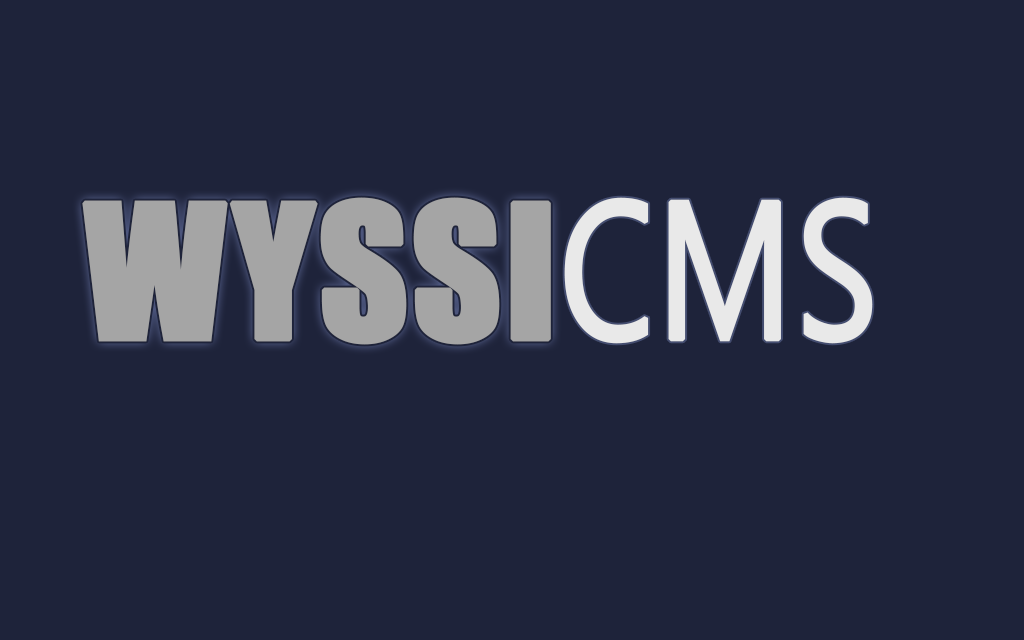
<style>
.page{position:relative;width:1024px;height:640px;background:#1e233a}
.page>*{position:absolute;margin:0}
.t1{font:172px "Impact";color:#a5a5a5;font-weight:bold}
.t2{font:194.9px "MicrosoftNewTaiLue";color:#e9e9e9;font-weight:bold;scale:0.77 1}
</style>
<div class="page">
<p class="t1" style="left:82px;top:197px;width:469px;height:148px">WYSSI</p>
<p class="t2" style="left:564px;top:197px;width:309px;height:147px">CMS</p>
</div>
